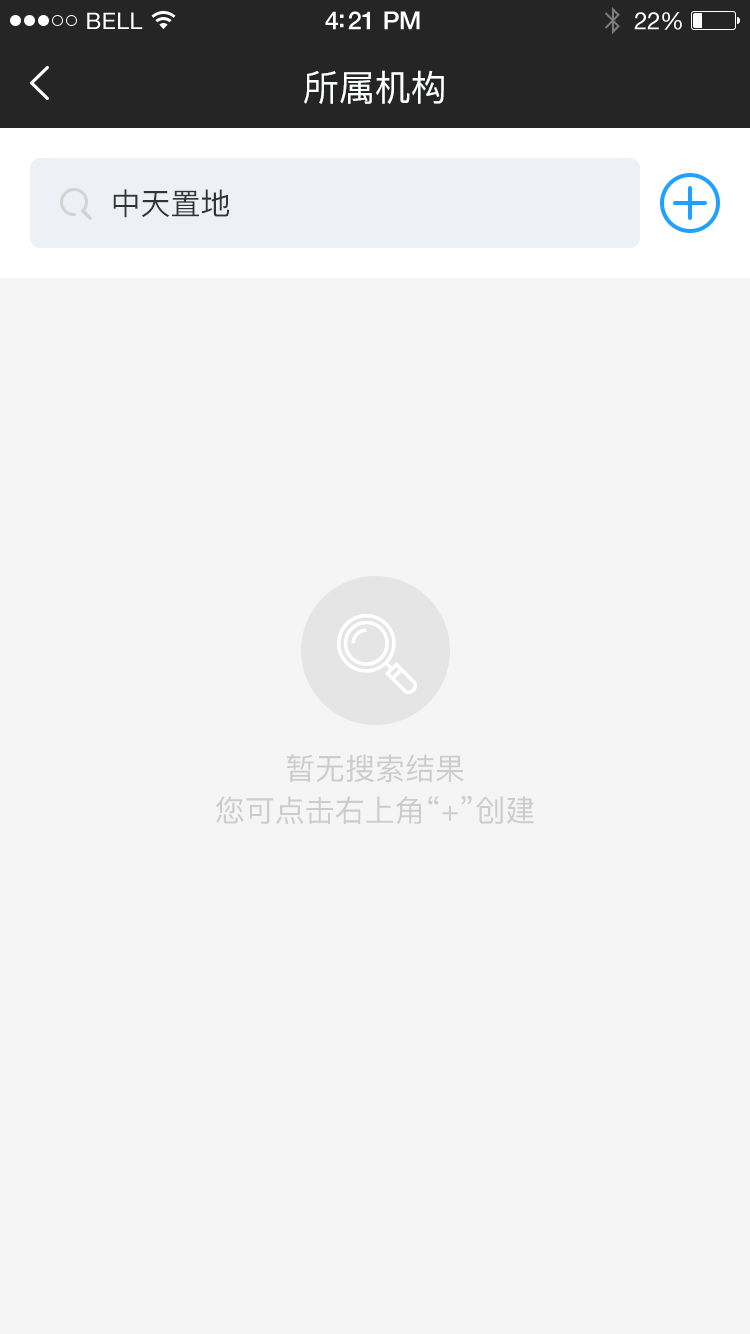
<style>
.page{position:relative;width:750px;height:1334px;background:#f5f5f5}
.page>*{position:absolute;margin:0}
.t1{font:23px "HelveticaNeue";letter-spacing:0.02em;color:#ffffff}
.t2{font:25px "HelveticaNeue-Medium";letter-spacing:-0.02em;color:#ffffff}
.t3{font:24px "HelveticaNeue";letter-spacing:-0.02em;color:#ffffff}
.t4{font:36px "PingFang-SC-Medium";color:#feffff}
.t5{font:30px "PingFang-SC-Medium";color:#333333}
.t6{font:30px "PingFang-SC-Medium";color:#cccccc}
</style>
<div class="page">
<p class="t1" style="left:87px;top:12px;width:56px;height:17px">BELL</p>
<p class="t2" style="left:325px;top:11px;width:95px;height:19px">4:21 PM</p>
<p class="t3" style="left:634px;top:12px;width:48px;height:18px">22%</p>
<p class="t4" style="left:304px;top:70px;width:140px;height:34px">所属机构</p>
<p class="t5" style="left:113px;top:189px;width:117px;height:29px">中天置地</p>
<p class="t6" style="left:286px;top:754px;width:178px;height:28px">暂无搜索结果</p>
<p class="t6" style="left:216px;top:796px;width:318px;height:28px">您可点击右上角“+”创建</p>
</div>
